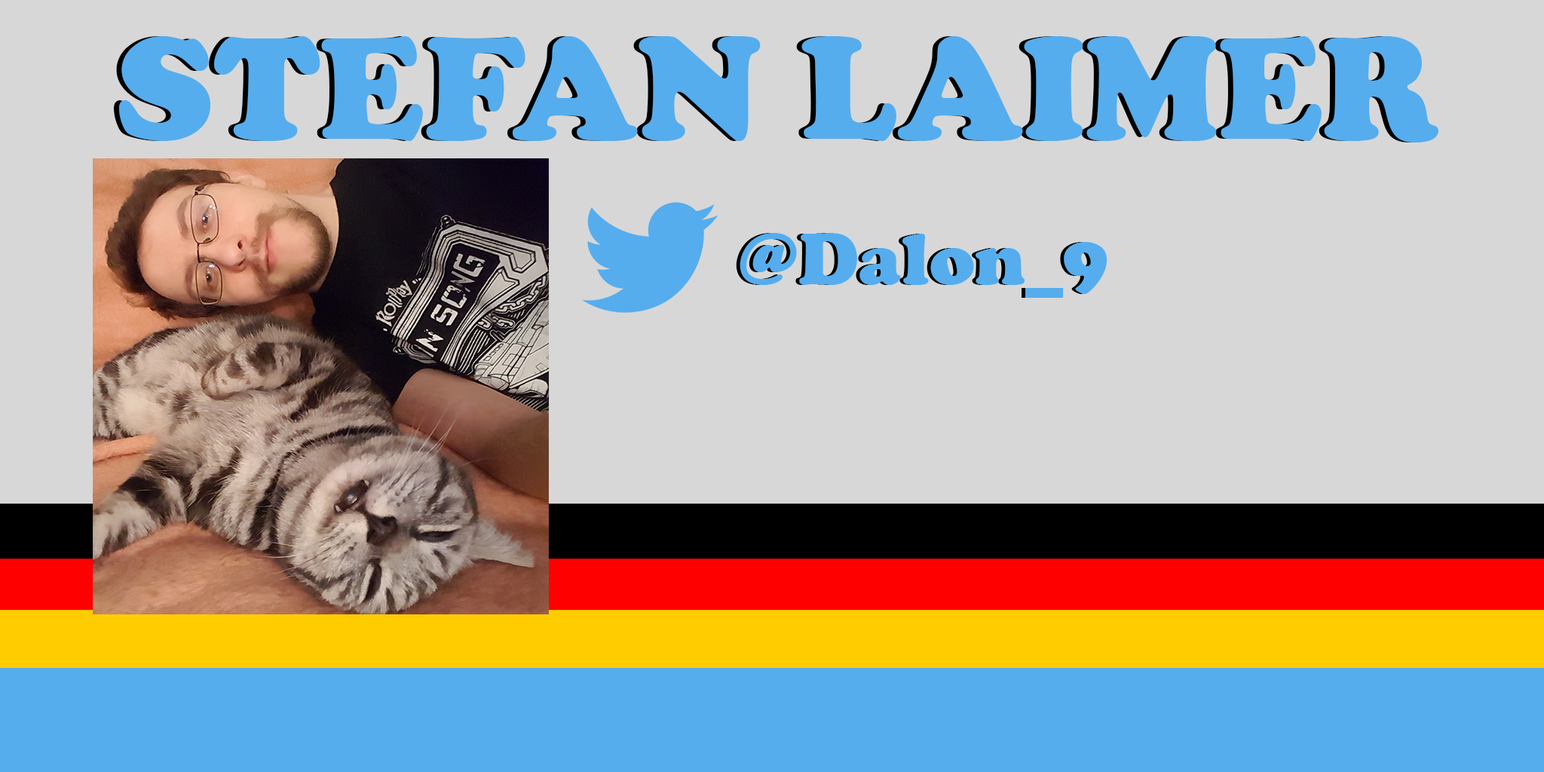
<style>
.page{position:relative;width:1544px;height:772px;background:#d7d7d7}
.page>*{position:absolute;margin:0}
.t1{font:150.8px "CooperBlack";color:#55adee}
.t2{font:75.4px "CooperBlack";color:#55adee}
</style>
<div class="page">
<p class="t1" style="left:114px;top:36px;width:1319px;height:107px">STEFAN LAIMER</p>
<p class="t1" style="left:119px;top:36px;width:1320px;height:107px">STEFAN LAIMER</p>
<p class="t2" style="left:736px;top:233px;width:368px;height:65px">@Dalon_9</p>
<p class="t2" style="left:740px;top:233px;width:368px;height:65px">@Dalon_9</p>
</div>
